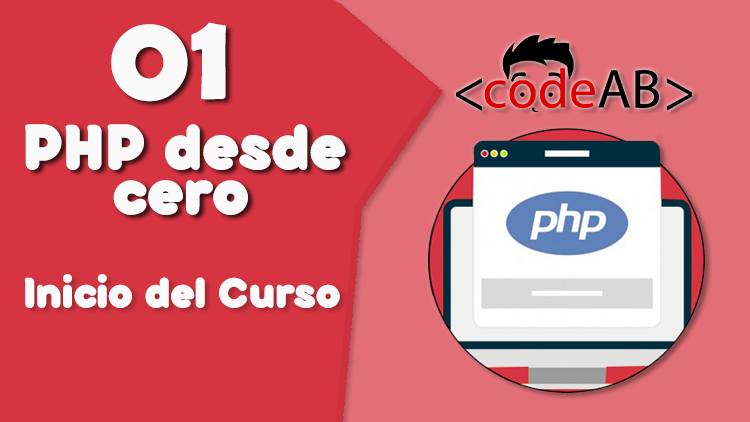
<style>
.page{position:relative;width:750px;height:422px;background:#d73441}
.page>*{position:absolute;margin:0}
.t1{font:123.7px "BerlinSansFBDemi-Bold";color:#fafafa;scale:1.06 1}
.t2{font:72px "Arista20Alternate-Regular";color:#fafafa}
.t3{font:48px "Arista20Alternate-Regular";color:#fafafa}
</style>
<div class="page">
<p class="t1" style="left:111px;top:22px;width:115px;height:80px">01</p>
<p class="t2" style="left:25px;top:124px;width:321px;height:46px">PHP desde</p>
<p class="t2" style="left:113px;top:180px;width:135px;height:35px">cero</p>
<p class="t3" style="left:24px;top:274px;width:316px;height:34px">Inicio del Curso</p>
</div>
